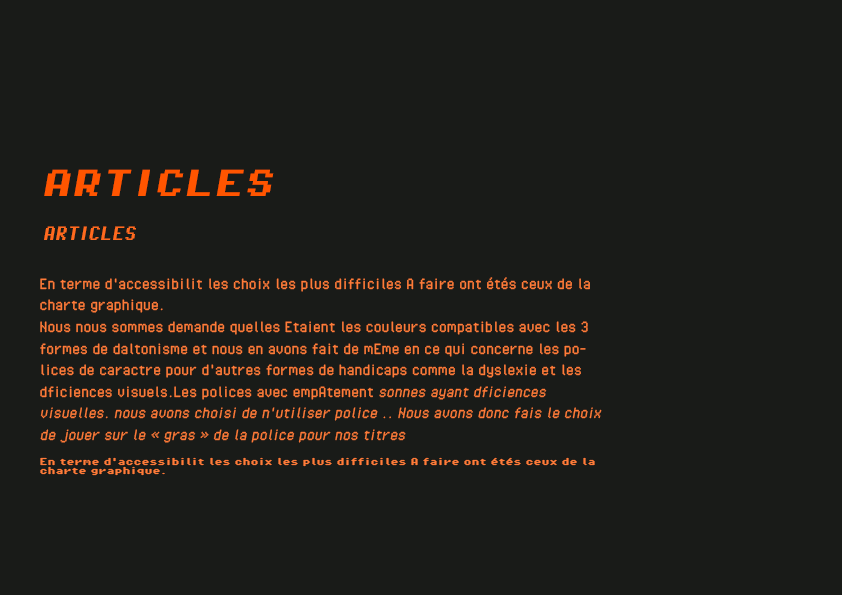
<style>
.page{position:relative;width:842px;height:595px;background:#191b18}
.page>*{position:absolute;margin:0}
.t1{font:30px "PixelOperator8-Bold";color:#ff5500;font-style:italic}
.t2{font:24px "PixelOperator-Bold";color:#ff6a1e;font-style:italic}
.t3{font:18px "PixelOperator";color:#ff7c39}
.t4{font:18px "PixelOperator";color:#ff7c39;font-style:italic}
.t5{font:8px "PixelOperator8-Bold";color:#ff7c39}
</style>
<div class="page">
<p class="t1" style="left:44px;top:169px;width:230px;height:27px">ARTICLES</p>
<p class="t2" style="left:44px;top:226px;width:92px;height:14px">ARTICLES</p>
<p class="t3" style="left:40px;top:277px;width:562px;height:166px">En terme d'accessibilit les choix les plus difficiles A faire ont étés ceux de la charte graphique.<br>Nous nous sommes demande quelles Etaient les couleurs compatibles avec les 3 formes de daltonisme et nous en avons fait de mEme en ce qui concerne les polices de caractre pour d'autres formes de handicaps comme la dyslexie et les dficiences visuels.Les polices avec empAtement <span class="t4">sonnes ayant dficiences visuelles. nous avons choisi de n'utiliser police .. Nous avons donc fais le choix de jouer sur le « gras » de la police pour nos titres</span></p>
<p class="t5" style="left:40px;top:457px;width:555px;height:19px">En terme d'accessibilit les choix les plus difficiles A faire ont étés ceux de la charte graphique.</p>
</div>
